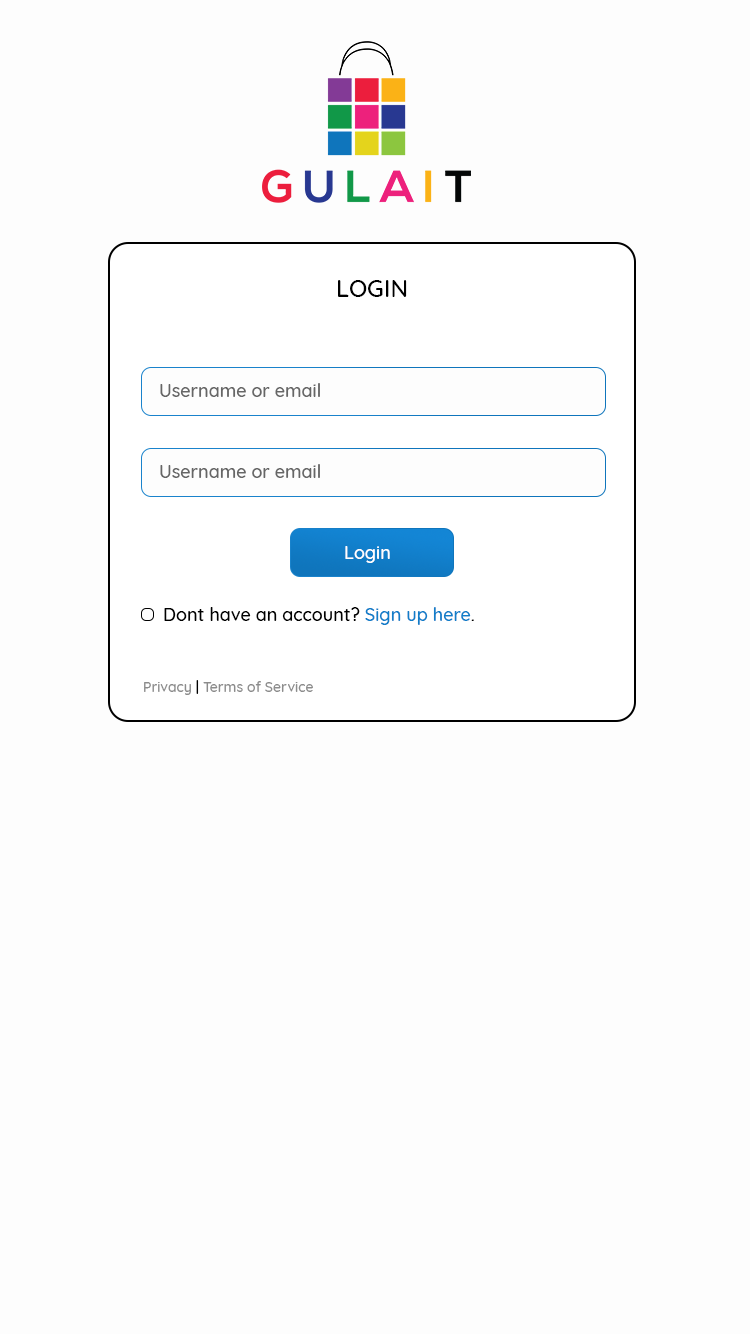
<style>
.page{position:relative;width:750px;height:1334px;background:#fdfdfd}
.page>*{position:absolute;margin:0}
.t1{font:24px "Quicksand-Medium";color:#000000;text-transform:uppercase}
.t2{font:18px "Quicksand-Medium";color:#666666}
.t3{font:18px "Quicksand-Medium";color:#ffffff}
.t4{font:18px "Quicksand-Medium";color:#000000}
.t5{font:18px "Quicksand-Medium";color:#117ec9}
.t6{font:14px "Quicksand-Medium";color:#8c8c8c}
.t7{font:14px "Quicksand-Medium";color:#000000}
</style>
<div class="page">
<p class="t1" style="left:338px;top:280px;width:69px;height:17px">login</p>
<p class="t2" style="left:160px;top:383px;width:160px;height:14px">Username or email</p>
<p class="t2" style="left:160px;top:464px;width:160px;height:14px">Username or email</p>
<p class="t3" style="left:345px;top:546px;width:45px;height:17px">Login</p>
<p class="t4" style="left:164px;top:607px;width:310px;height:18px">Dont have an account? <span class="t5">Sign up here</span>.</p>
<p class="t6" style="left:144px;top:680px;width:169px;height:15px">Privacy <span class="t7">| </span>Terms of Service</p>
</div>
